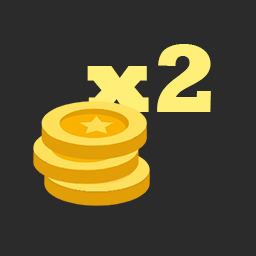
<style>
.page{position:relative;width:256px;height:256px;background:#2b2b2b}
.page>*{position:absolute;margin:0}
.t1{font:97.8px "Rockwell-ExtraBold";color:#ffef78}
</style>
<div class="page">
<p class="t1" style="left:87px;top:44px;width:124px;height:68px">x2</p>
</div>
